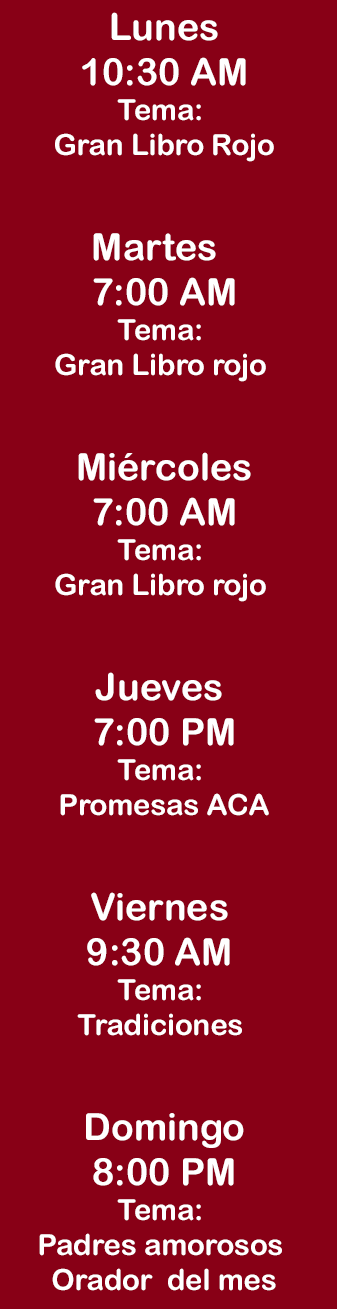
<style>
.page{position:relative;width:337px;height:1309px;background:#880016}
.page>*{position:absolute;margin:0}
.t1{font:29.2px "ArialRoundedMTBold";color:#ffffff}
.t2{font:37.5px "ArialRoundedMTBold";color:#ffffff}
</style>
<div class="page">
<p class="t1" style="left:39px;top:12px;width:243px;height:1279px;text-align:center"><span class="t2">Lunes<br>10:30 AM<br></span>Tema: <br>Gran Libro Rojo<br><br><span class="t2">Martes  <br>7:00 AM<br></span>Tema: <br>Gran Libro rojo <br><br><span class="t2">Miércoles<br>7:00 AM<br></span>Tema: <br>Gran Libro rojo <br><br><span class="t2">Jueves <br>7:00 PM<br></span>Tema: <br>Promesas ACA<br><br><span class="t2">Viernes <br>9:30 AM <br></span>Tema: <br>Tradiciones <br><br><span class="t2">Domingo<br>8:00 PM<br></span>Tema: <br>Padres amorosos <br>Orador  del mes</p>
</div>
